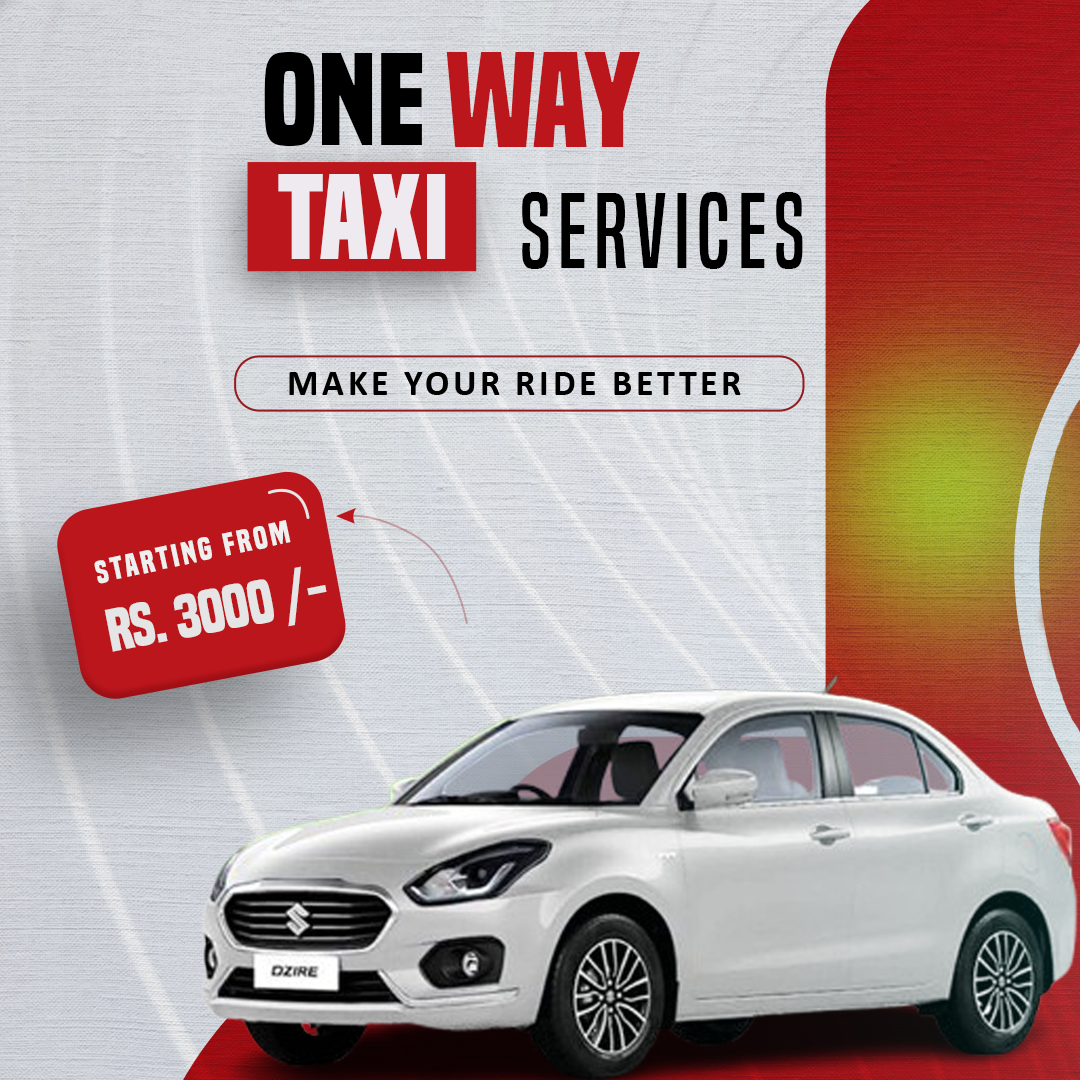
<style>
.page{position:relative;width:1080px;height:1080px}
.page>*{position:absolute;margin:0}
.t1{font:122.4px "BuiltTitlingRg-Bold";letter-spacing:0.005em;color:#000000;text-transform:uppercase}
.t2{font:126.3px "BuiltTitlingRg-Bold";letter-spacing:0.005em;color:#bc161d;text-transform:uppercase}
.t3{font:112.3px "BuiltTitlingRg-Bold";letter-spacing:0.005em;color:#eeeaef;text-transform:uppercase}
.t4{font:98.7px "BuiltTitlingRg-Regular";letter-spacing:0.075em;color:#000000;text-transform:uppercase}
.t5{font:30px "BuiltTitlingRg-Bold";letter-spacing:0.1em;color:#efefef}
.t6{font:56px "BuiltTitlingRg-Bold";letter-spacing:-0.01em;color:#e5e5e5;text-transform:uppercase}
</style>
<div class="page">
<p class="t1" style="left:264px;top:52px;width:159px;height:94px">ONE</p>
<p class="t2" style="left:446px;top:52px;width:194px;height:95px">WAY</p>
<p class="t3" style="left:278px;top:174px;width:168px;height:85px">TAXi</p>
<p class="t4" style="left:522px;top:192px;width:281px;height:77px">SERVICES</p>
<p class="t5" style="left:94px;top:520px;width:197px;height:64px;rotate:-12deg">Starting From</p>
<p class="t6" style="left:104px;top:566px;width:223px;height:86px;rotate:-11deg">RS. 3000 /-</p>
</div>
